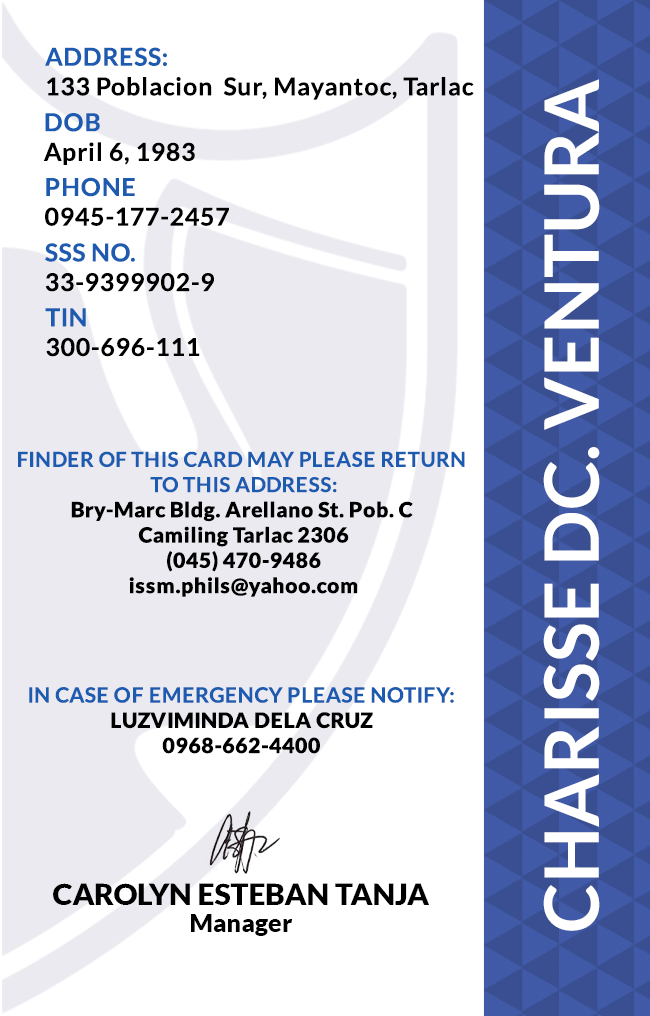
<style>
.page{position:relative;width:650px;height:1016px;background:#ffffff}
.page>*{position:absolute;margin:0}
.t1{font:24.7px/29.6px "Lato-Bold";letter-spacing:0.025em;color:#000000}
.t2{font:75px "Lato-Bold";color:#ffffff}
.t3{font:24.7px/29.6px "Lato-Bold";letter-spacing:0.025em}
.t4{font:21.1px "Lato-Black";letter-spacing:0.025em}
.t5{font:20.5px/25.3px "Lato-Bold";letter-spacing:0.025em;text-transform:uppercase}
.t6{font:21.1px/25.3px "Lato-Bold";letter-spacing:0.025em}
.t7{font:29.5px "Lato-Black";color:#000000}
.t8{font:25px "Lato-Black";color:#000000}
</style>
<div class="page">
<p class="t1" style="left:45px;top:47px;width:429px;height:53px">ADDRESS:<br>133 Poblacion  Sur, Mayantoc, Tarlac</p>
<p class="t2" style="left:543px;top:79px;width:57px;height:852px;rotate:-90deg">CHARISSE DC. VENTURA</p>
<p class="t3" style="left:43px;top:113px;width:152px;height:52px">DOB<br>April 6, 1983</p>
<p class="t3" style="left:45px;top:177px;width:184px;height:49px">PHONE <br>0945-177-2457</p>
<p class="t3" style="left:45px;top:243px;width:169px;height:49px">SSS NO.<br>33-9399902-9</p>
<p class="t1" style="left:45px;top:308px;width:155px;height:49px">TIN<br>300-696-111</p>
<p class="t4" style="left:18px;top:451px;width:447px;height:146px;text-align:center"><span class="t5">Finder of this card may please return <br>to this address:<br></span>Bry-Marc Bldg. Arellano St. Pob. C <br>Camiling Tarlac 2306<br>(045) 470-9486<br>issm.phils@yahoo.com</p>
<p class="t6" style="left:29px;top:687px;width:425px;height:67px;text-align:center">IN CASE OF EMERGENCY PLEASE NOTIFY:<br><span class="t4">LUZVIMINDA DELA CRUZ<br>0968-662-4400</span></p>
<p class="t7" style="left:53px;top:883px;width:376px;height:22px">CAROLYN ESTEBAN TANJA</p>
<p class="t8" style="left:191px;top:914px;width:102px;height:22px">Manager</p>
</div>
